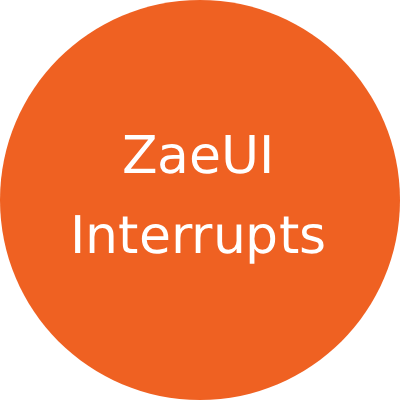
<style>
.page{position:relative;width:400px;height:400px;background:#ef6122}
.page>*{position:absolute;margin:0}
.t1{font:52px "DejaVuSans";color:#ffffff}
</style>
<div class="page">
<p class="t1" style="left:75px;top:135px;width:249px;height:129px;text-align:center">ZaeUI<br><br>Interrupts</p>
</div>
